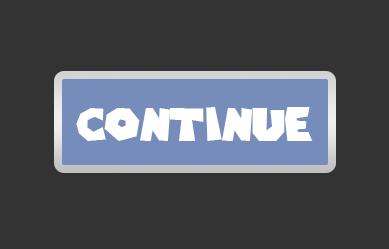
<style>
.page{position:relative;width:389px;height:249px;background:#333333}
.page>*{position:absolute;margin:0}
.t1{font:44.7px "SuperMarioGalaxy";color:#ffffff}
</style>
<div class="page">
<p class="t1" style="left:76px;top:107px;width:237px;height:34px">continue</p>
</div>
